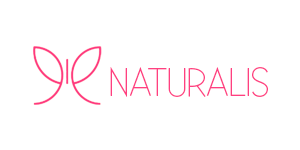
<style>
.page{position:relative;width:300px;height:150px;background:#ffffff}
.page>*{position:absolute;margin:0}
.t1{font:39.5px "Existence-Light";letter-spacing:-0.05em;color:#ff4081}
</style>
<div class="page">
<p class="t1" style="left:110px;top:67px;width:158px;height:30px">NATURALIS</p>
</div>
